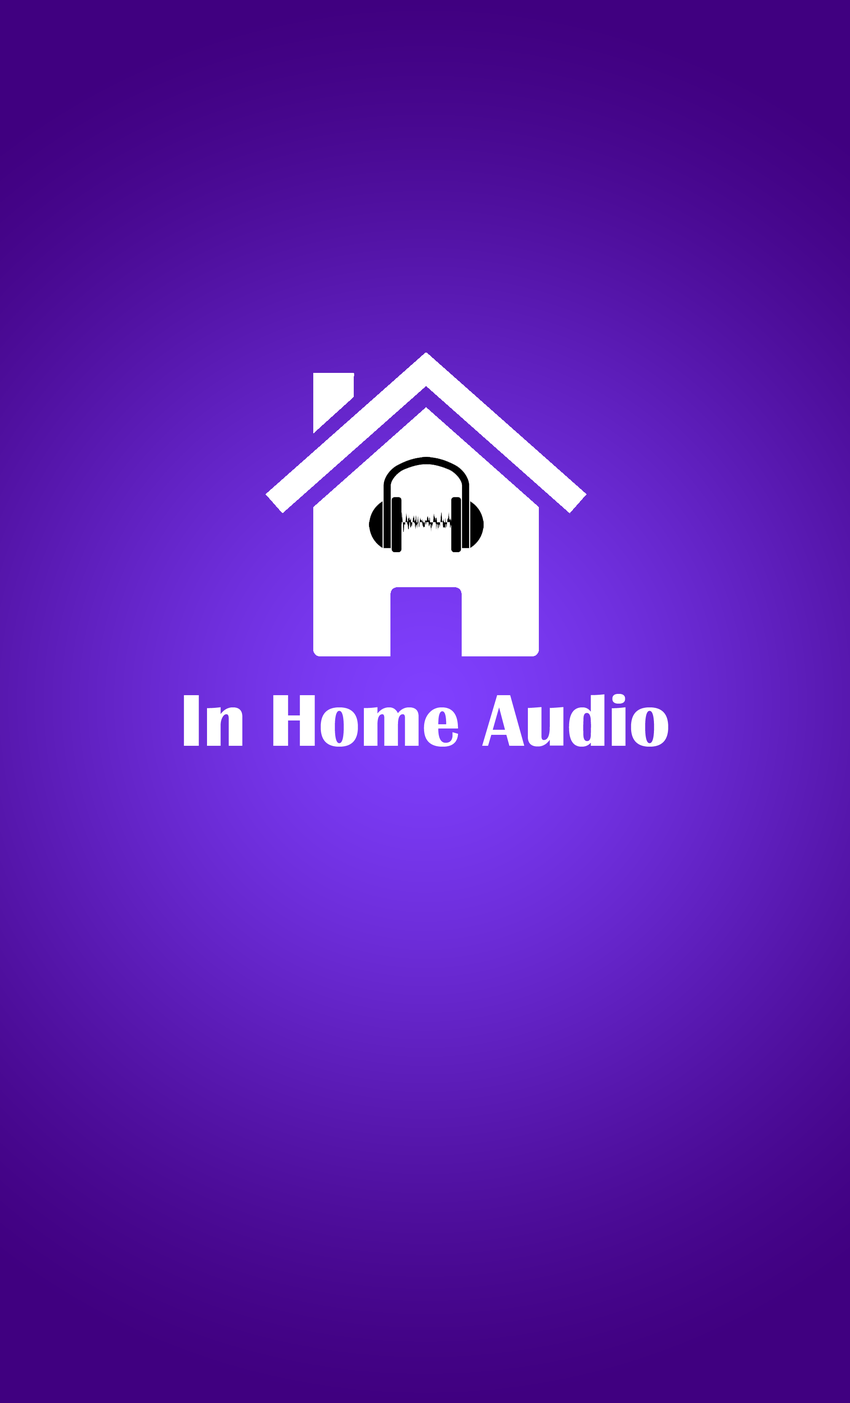
<style>
.page{position:relative;width:850px;height:1403px}
.page>*{position:absolute;margin:0}
.t1{font:75.9px "BritannicBold";color:#ffffff}
</style>
<div class="page">
<p class="t1" style="left:184px;top:694px;width:484px;height:52px">In Home Audio</p>
</div>
